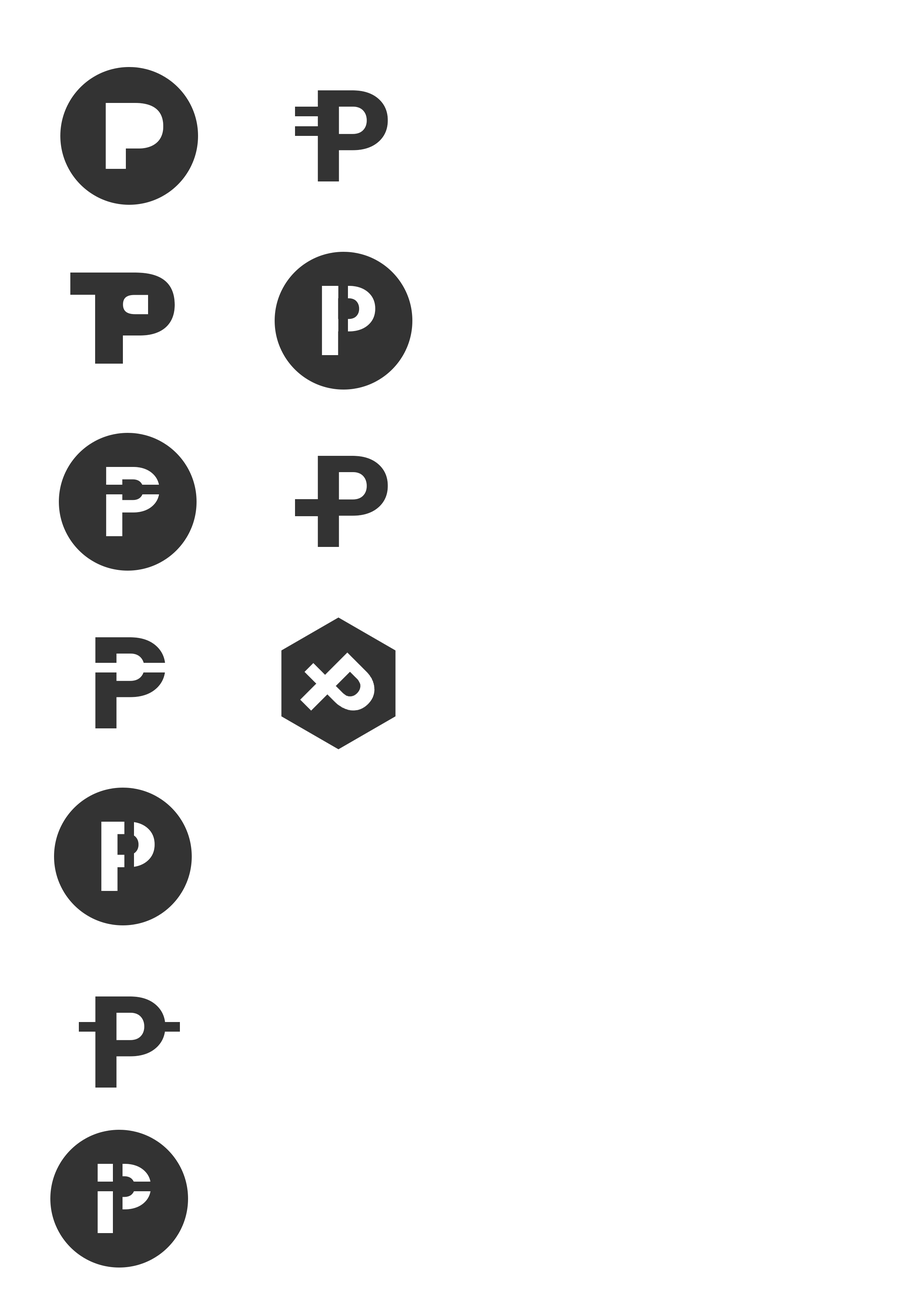
<style>
.page{position:relative;width:918px;height:1299px;background:#ffffff}
.page>*{position:absolute;margin:0}
.t1{font:128px "Roboto-Black";color:#333333}
.t2{font:92.6px "HelveticaNeueCyr-Black";color:#ffffff}
.t3{font:128px "HelveticaNeueCyr-Black";color:#333333}
.t4{font:97.2px "Roboto-Black";color:#ffffff}
</style>
<div class="page">
<p class="t1" style="left:318px;top:90px;width:70px;height:91px">P</p>
<p class="t2" style="left:106px;top:103px;width:57px;height:66px">P</p>
<p class="t3" style="left:95px;top:272px;width:80px;height:92px">P</p>
<p class="t4" style="left:322px;top:286px;width:53px;height:69px">P</p>
<p class="t1" style="left:318px;top:456px;width:70px;height:91px">P</p>
<p class="t4" style="left:106px;top:467px;width:54px;height:69px">P</p>
<p class="t1" style="left:95px;top:637px;width:70px;height:91px">P</p>
<p class="t4" style="left:101px;top:822px;width:54px;height:69px">P</p>
<p class="t1" style="left:95px;top:996px;width:70px;height:91px">P</p>
<p class="t4" style="left:97px;top:1164px;width:54px;height:69px">P</p>
</div>
